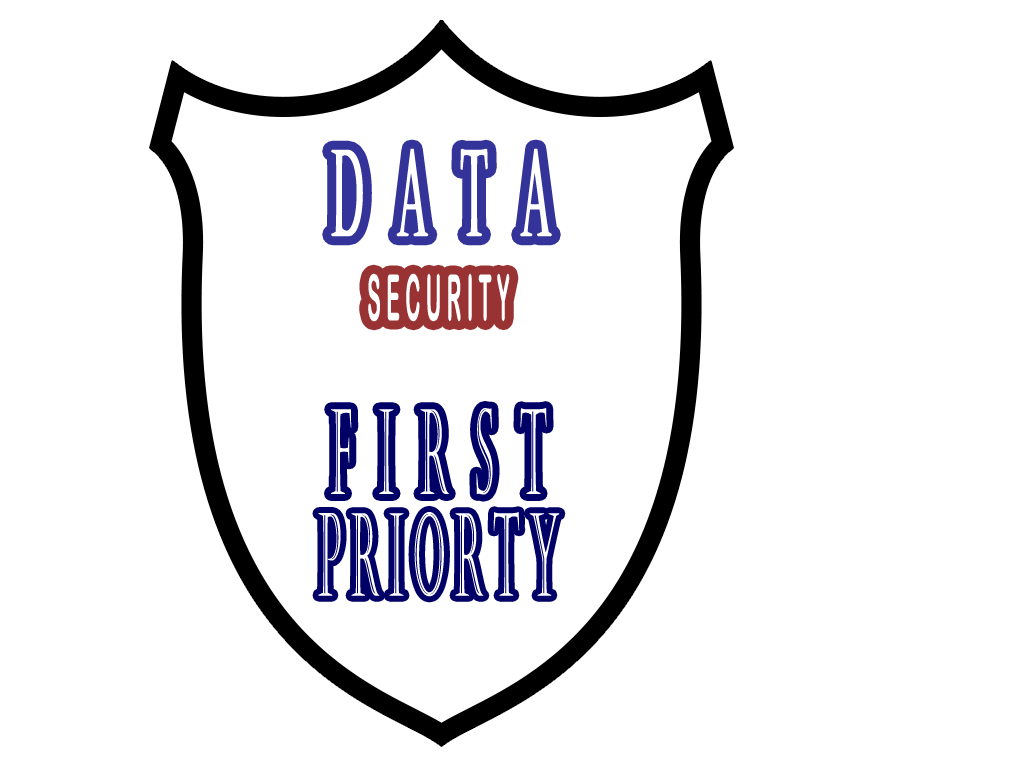
<style>
.page{position:relative;width:1024px;height:768px;background:#ffffff}
.page>*{position:absolute;margin:0}
.t1{font:118.1px "Castellar";letter-spacing:0.89em;color:#ffffff;font-weight:bold;scale:0.31 1}
.t2{font:63.8px "ArialRoundedMTBold";letter-spacing:0.27em;color:#ffffff;scale:0.32 1}
.t3{font:115.2px "Castellar";letter-spacing:0.27em;color:#ffffff;scale:0.32 1}
</style>
<div class="page">
<p class="t1" style="left:331px;top:148px;width:221px;height:89px">DATA</p>
<p class="t2" style="left:368px;top:273px;width:142px;height:49px">SECURITY</p>
<p class="t3" style="left:318px;top:512px;width:242px;height:85px">PRIORTY</p>
</div>
